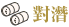
<style>
.page{position:relative;width:69px;height:27px;background:#ffffff}
.page>*{position:absolute;margin:0}
.t1{font:18px "RyuminPro-Heavy";color:#ae9442}
</style>
<div class="page">
<p class="t1" style="left:33px;top:5px;width:35px;height:18px">對潛</p>
</div>
